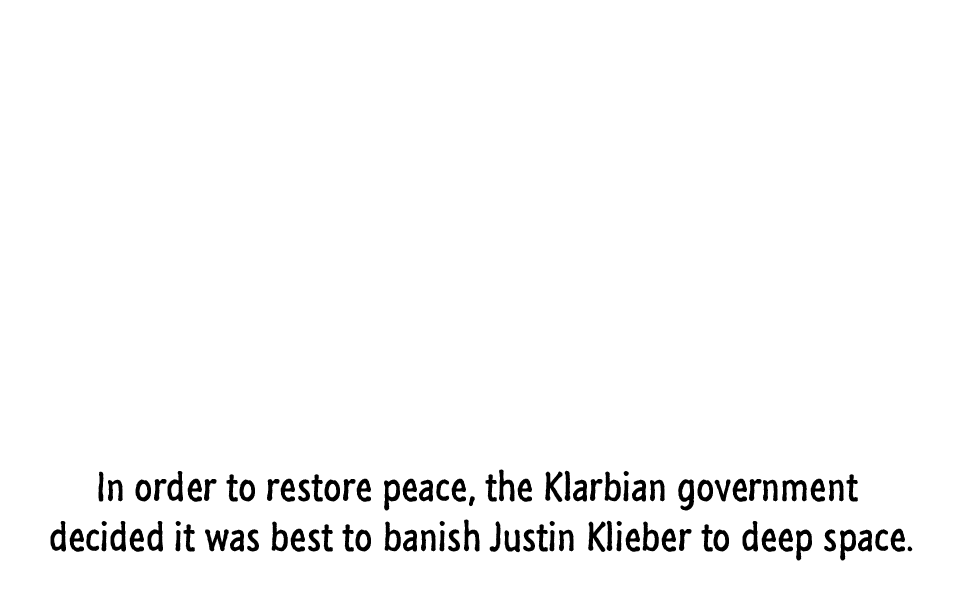
<style>
.page{position:relative;width:960px;height:600px;background:#ffffff}
.page>*{position:absolute;margin:0}
.t1{font:42px "SegoeMarker";color:#000000}
</style>
<div class="page">
<p class="t1" style="left:50px;top:469px;width:863px;height:92px;text-align:center">In order to restore peace, the Klarbian government <br>decided it was best to banish Justin Klieber to deep space.</p>
</div>
